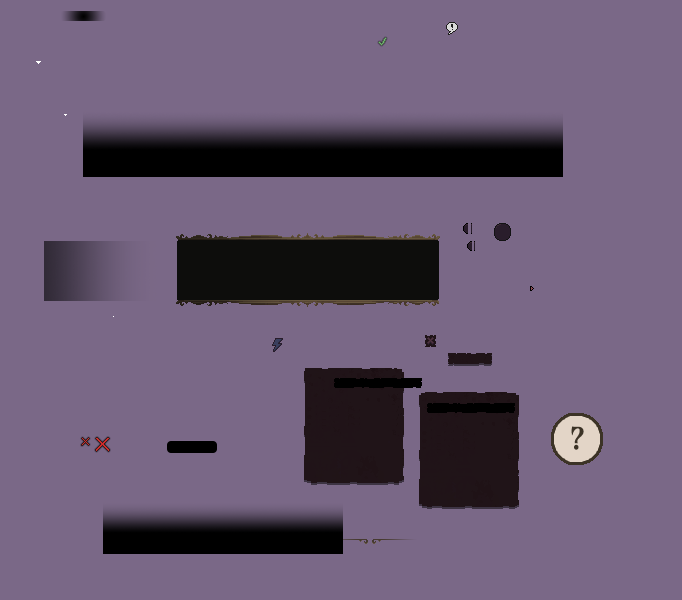
<style>
.page{position:relative;width:682px;height:600px;background:#7a6887}
.page>*{position:absolute;margin:0}
.t1{font:30px "Amarante-Regular";color:#3c3326}
</style>
<div class="page">
<p class="t1" style="left:571px;top:426px;width:13px;height:24px">?</p>
</div>
